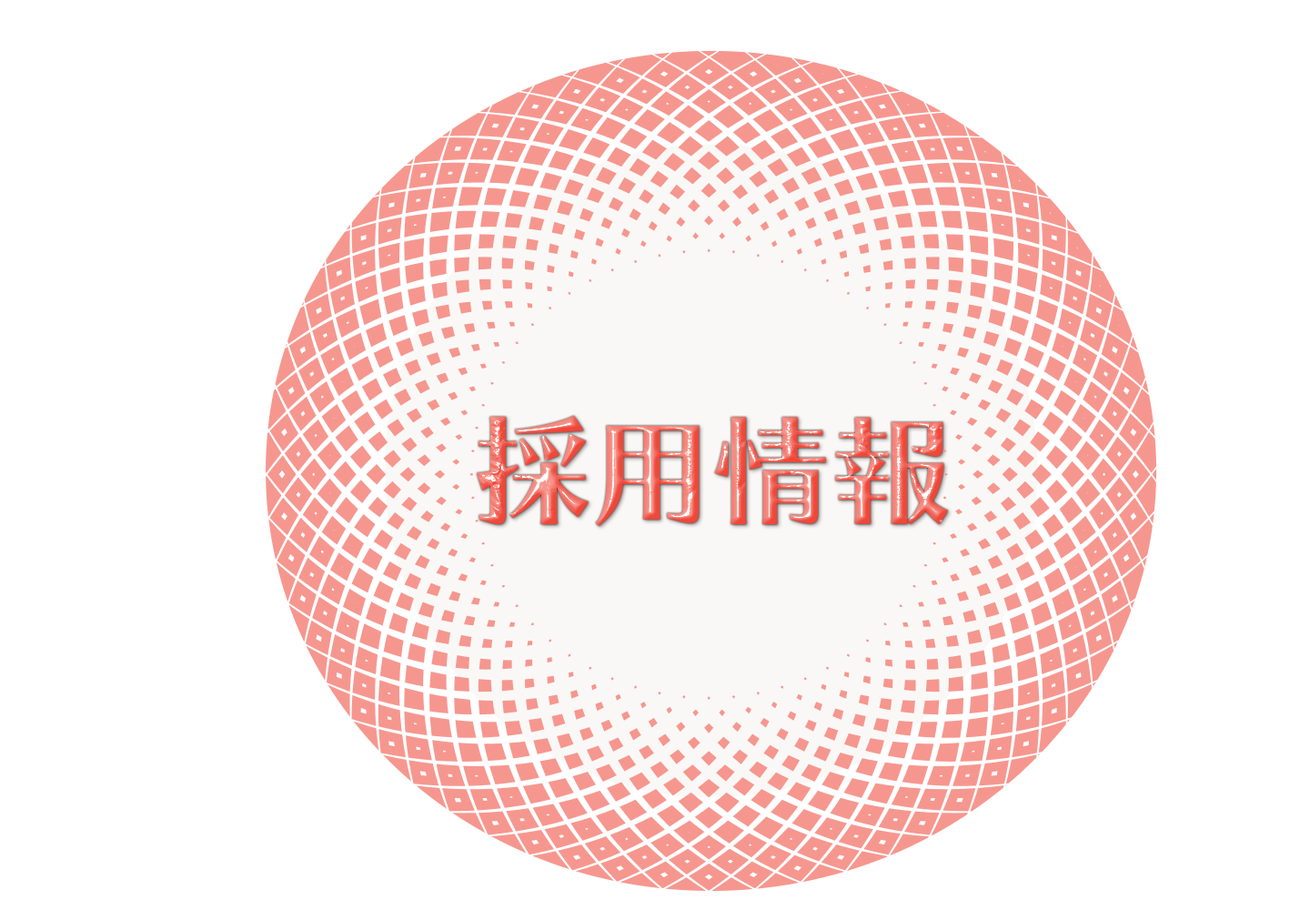
<style>
.page{position:relative;width:1310px;height:910px;background:#ffffff}
.page>*{position:absolute;margin:0}
.t1{font:119.3px "Kan415TyposStd-Regular"}
</style>
<div class="page">
<p class="t1" style="left:477px;top:415px;width:472px;height:112px">採用情報</p>
</div>
